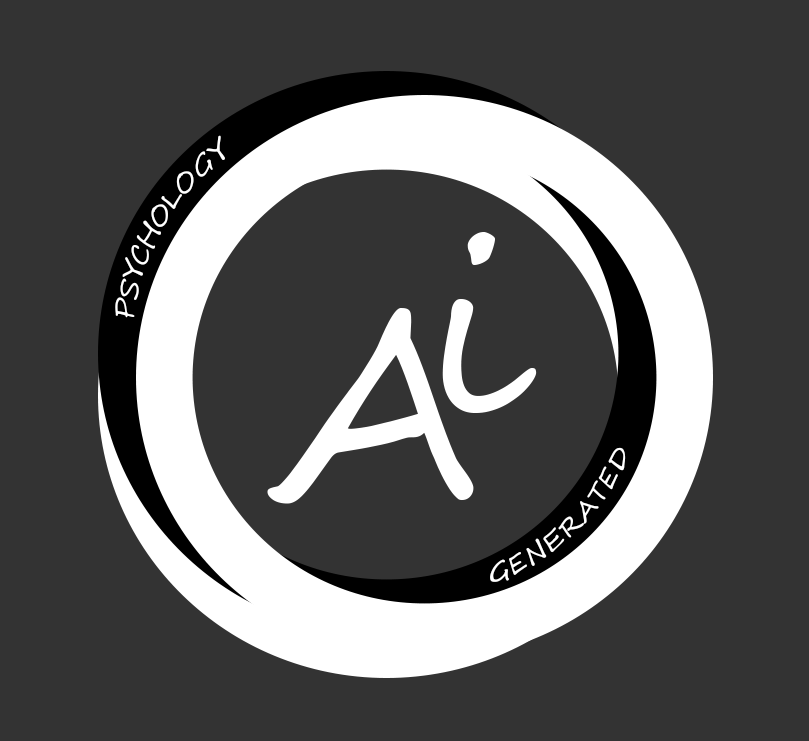
<style>
.page{position:relative;width:809px;height:741px;background:#333333}
.page>*{position:absolute;margin:0}
.t1{font:247.1px "SegoeScript";color:#ffffff}
.t2{font:256.2px "SegoeScript";color:#ffffff}
.t3{font:25px "SegoeScript";color:#ffffff}
</style>
<div class="page">
<p class="t1" style="left:442px;top:232px;width:95px;height:181px">i</p>
<p class="t2" style="left:267px;top:308px;width:207px;height:196px">A</p>
<p class="t3" style="left:490px;top:447px;width:136px;height:135px;rotate:-43deg">GENERATED</p>
</div>
